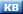
<style>
.page{position:relative;width:23px;height:14px}
.page>*{position:absolute;margin:0}
.t1{font:10px "ErasITC-Bold";letter-spacing:0.025em;color:#ffffff}
</style>
<div class="page">
<p class="t1" style="left:4px;top:4px;width:15px;height:7px">KB</p>
</div>
